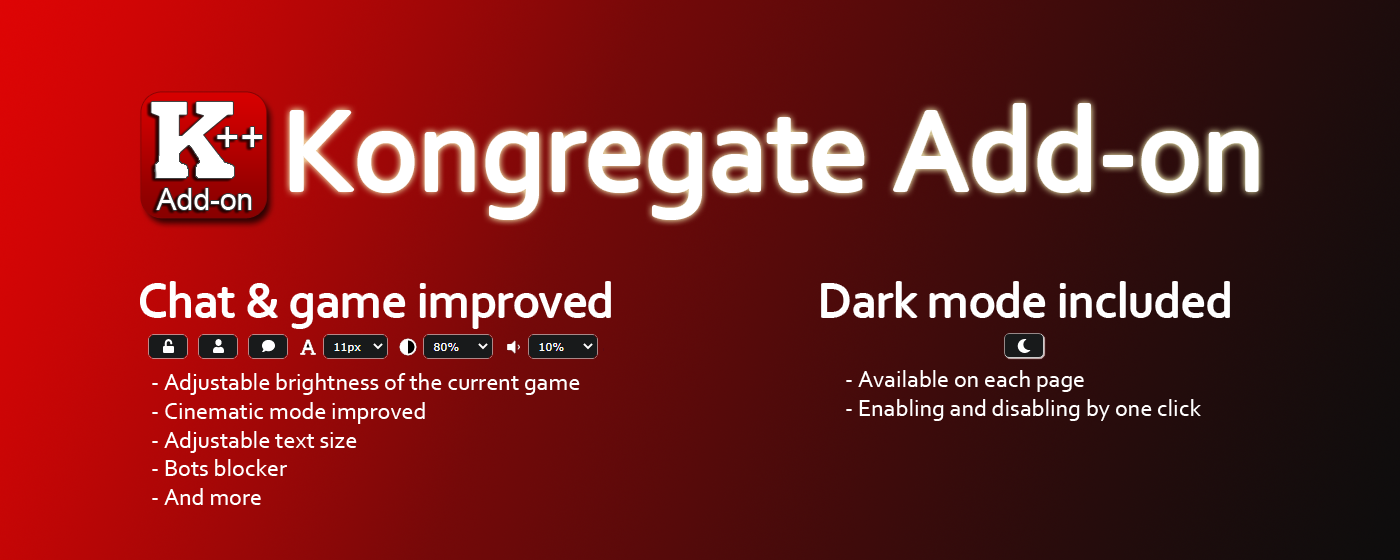
<style>
.page{position:relative;width:1400px;height:560px}
.page>*{position:absolute;margin:0}
.t1{font:120px "Corbel";color:#ffffff}
.t2{font:50px "Corbel";color:#ffffff}
.t3{font:24px "Corbel";color:#ffffff}
</style>
<div class="page">
<p class="t1" style="left:291px;top:105px;width:966px;height:113px">Kongregate Add-on</p>
<p class="t2" style="left:141px;top:282px;width:469px;height:46px">Chat &amp; game improved</p>
<p class="t2" style="left:822px;top:282px;width:407px;height:35px">Dark mode included</p>
<p class="t3" style="left:152px;top:373px;width:428px;height:132px">- Adjustable brightness of the current game<br>- Cinematic mode improved<br>- Adjustable text size<br>- Bots blocker<br>- And more</p>
<p class="t3" style="left:846px;top:370px;width:355px;height:51px">- Available on each page<br>- Enabling and disabling by one click</p>
</div>
